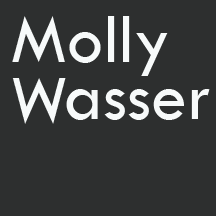
<style>
.page{position:relative;width:216px;height:216px;background:#2d2f2f}
.page>*{position:absolute;margin:0}
.t1{font:72px "TwCenMT-Regular";color:#f7fafa}
</style>
<div class="page">
<p class="t1" style="left:12px;top:16px;width:156px;height:60px">Molly</p>
<p class="t1" style="left:12px;top:78px;width:54px;height:46px;rotate:180deg">M</p>
<p class="t1" style="left:66px;top:89px;width:144px;height:31px">asser</p>
</div>
